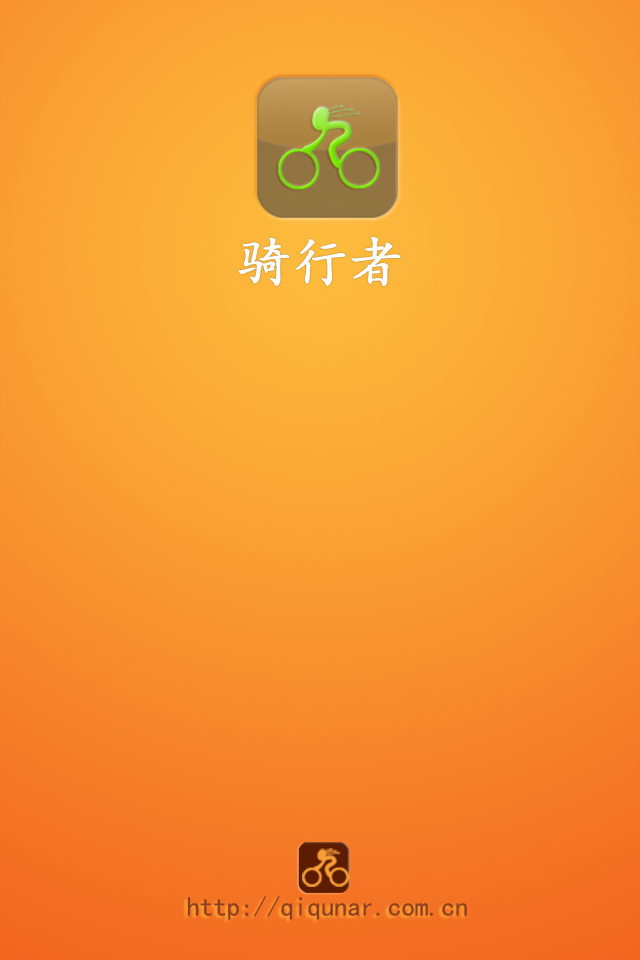
<style>
.page{position:relative;width:640px;height:960px}
.page>*{position:absolute;margin:0}
.t1{font:54.9px "KaiTi";color:#fffefe;font-weight:bold}
.t2{font:27.2px "KaiTi";color:#8c3f1e}
</style>
<div class="page">
<p class="t1" style="left:238px;top:237px;width:163px;height:49px">骑行者</p>
<p class="t2" style="left:187px;top:896px;width:280px;height:24px">http://qiqunar.com.cn</p>
</div>
